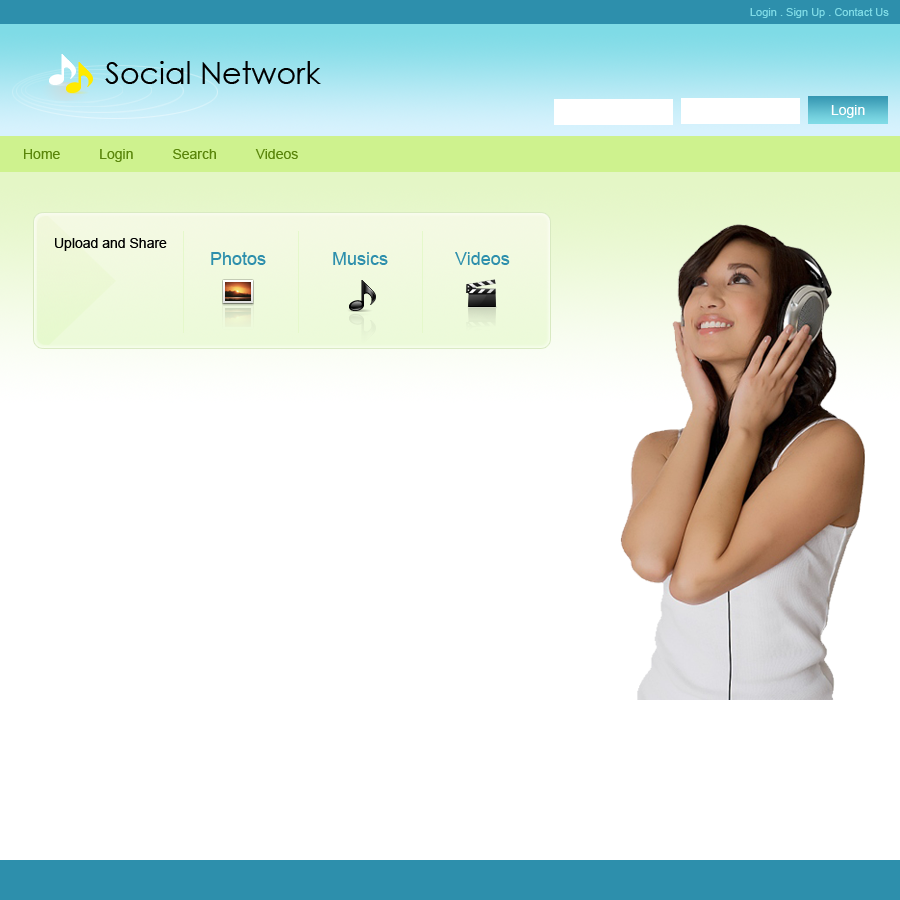
<style>
.page{position:relative;width:900px;height:900px;background:#ffffff}
.page>*{position:absolute;margin:0}
.t1{font:11px "ArialMT";color:#7fdbe6}
.t2{font:30px "CenturyGothic";color:#000000}
.t3{font:14px "ArialMT";color:#ffffff}
.t4{font:14px "ArialMT";color:#5a860b}
.t5{font:14px "ArialMT";color:#000000}
.t6{font:18px "ArialMT";color:#2d8fac}
</style>
<div class="page">
<p class="t1" style="left:750px;top:8px;width:139px;height:10px">Login . Sign Up . Contact Us</p>
<p class="t2" style="left:105px;top:61px;width:216px;height:23px">Social Network</p>
<p class="t3" style="left:831px;top:105px;width:34px;height:13px">Login</p>
<p class="t4" style="left:24px;top:149px;width:274px;height:13px">Home          Login          Search          Videos</p>
<p class="t5" style="left:55px;top:238px;width:112px;height:13px">Upload and Share</p>
<p class="t6" style="left:211px;top:252px;width:55px;height:13px">Photos</p>
<p class="t6" style="left:333px;top:252px;width:55px;height:13px">Musics</p>
<p class="t6" style="left:455px;top:252px;width:55px;height:13px">Videos</p>
</div>
